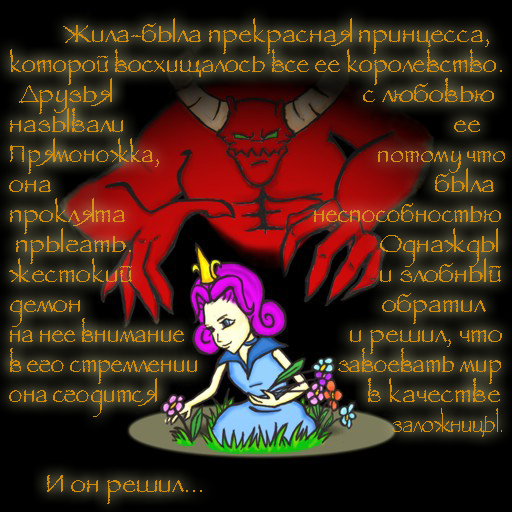
<style>
.page{position:relative;width:512px;height:512px}
.page>*{position:absolute;margin:0}
.t1{font:25px/30px "1Papyrus";color:#d18b07}
.t2{font:25px/30px "Papyrus-Regular";color:#d18b07}
.t3{font:25px/30px "1Papyrus";color:#d18b07;scale:0.94 1}
.t4{font:25px/30px "1Papyrus";color:#d18b07;scale:0.9 1}
.t5{font:25px/30px "1Papyrus";color:#d18b07;scale:0.89 1}
.t6{font:25px/30px "1Papyrus";letter-spacing:-0.01em;color:#d18b07;scale:0.8 1}
</style>
<div class="page">
<p class="t1" style="left:9px;top:18px;width:496px;height:486px"><span class="t2">           </span>Жила-была прекрасная принцесса, <br><span class="t3">которой восхищалось все ее королевство.<br>  </span>Друзья                                                  с любовью<br>называли                                                                 ее<br><span class="t4">Прямоножка</span>,                                     <span class="t5">потому что<br></span>она                                                                была<br>проклята                                <span class="t4">неспособностью<br></span> прыгать.                                        Однажды<br>жестокий                                         и злобный<br>демон                                                  обратил<br><span class="t4">на нее внимание                            </span>и решил, что<br><span class="t4">в его стремлении                        завоевать мир<br>она сгодится                                     </span>в качестве<br>                                                          <span class="t6">заложницы.<br><br>       </span>И он решил...</p>
<p class="t1" style="left:9px;top:18px;width:496px;height:486px"><span class="t2">           </span>Жила-была прекрасная принцесса, <br><span class="t3">которой восхищалось все ее королевство.<br>  </span>Друзья                                                  с любовью<br>называли                                                                 ее<br><span class="t4">Прямоножка</span>,                                     <span class="t5">потому что<br></span>она                                                                была<br>проклята                                <span class="t4">неспособностью<br></span> прыгать.                                        Однажды<br>жестокий                                         и злобный<br>демон                                                  обратил<br><span class="t4">на нее внимание                            </span>и решил, что<br><span class="t4">в его стремлении                        завоевать мир<br>она сгодится                                     </span>в качестве<br>                                                          <span class="t6">заложницы.<br><br>       </span>И он решил...</p>
</div>
